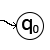
<style>
.page{position:relative;width:50px;height:50px;background:#ffffff}
.page>*{position:absolute;margin:0}
.t1{font:24px "Calibri";color:#000000}
.t2{font:12px "Calibri";color:#000000}
</style>
<div class="page">
<p class="t1" style="left:22px;top:19px;width:10px;height:15px">q</p>
<p class="t2" style="left:33px;top:25px;width:6px;height:8px">0</p>
</div>
